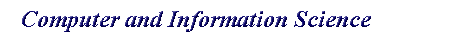
<style>
.page{position:relative;width:454px;height:34px;background:#ffffff}
.page>*{position:absolute;margin:0}
.t1{font:24px "TimesNewRomanPS-BoldItalicMT"}
</style>
<div class="page">
<p class="t1" style="left:22px;top:11px;width:349px;height:21px">Computer and Information Science</p>
<p class="t1" style="left:23px;top:11px;width:349px;height:21px">Computer and Information Science</p>
</div>
